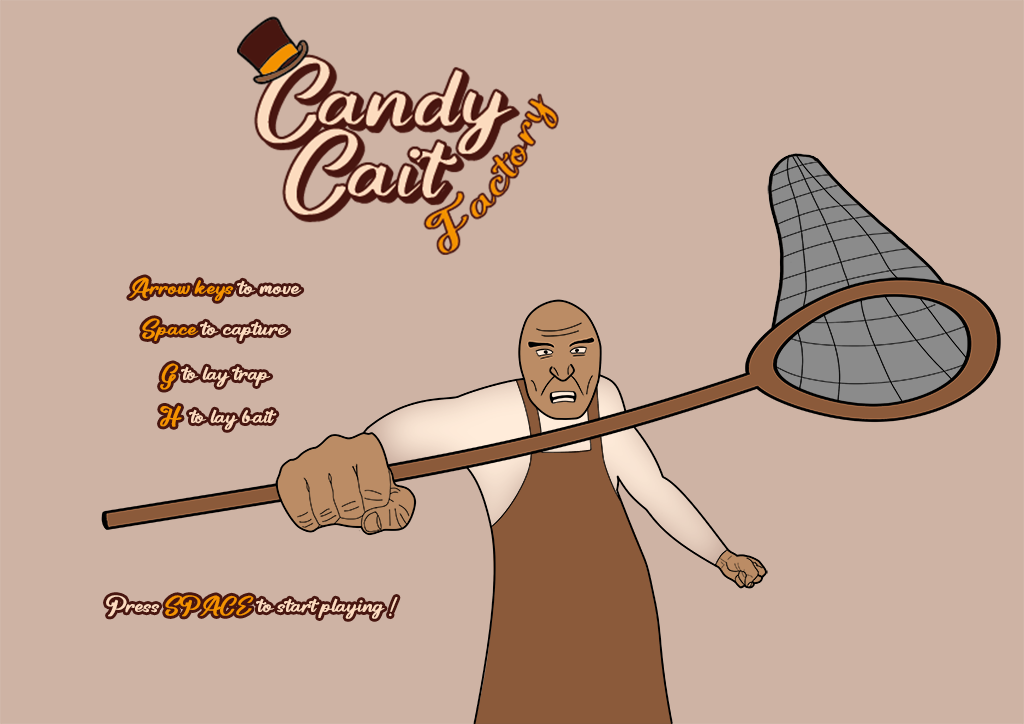
<style>
.page{position:relative;width:1024px;height:724px;background:#ceb3a4}
.page>*{position:absolute;margin:0}
.t1{font:20.6px "Candy";color:#f59300}
.t2{font:20.6px "Candy";color:#fddbbf}
.t3{font:20.6px "Candy";color:#fcdbbe}
.t4{font:20.6px "Candy";color:#f49200}
</style>
<div class="page">
<p class="t1" style="left:129px;top:277px;width:173px;height:24px">Arrow keys<span class="t2"> to move</span></p>
<p class="t2" style="left:142px;top:318px;width:147px;height:23px"><span class="t1">Space</span> to capture</p>
<p class="t3" style="left:160px;top:363px;width:111px;height:27px"><span class="t1">G </span>to lay trap</p>
<p class="t2" style="left:160px;top:405px;width:117px;height:25px"><span class="t1">H </span> to lay bait</p>
<p class="t2" style="left:106px;top:595px;width:292px;height:24px">Press <span class="t4">SPACE</span> to start playing !</p>
</div>
